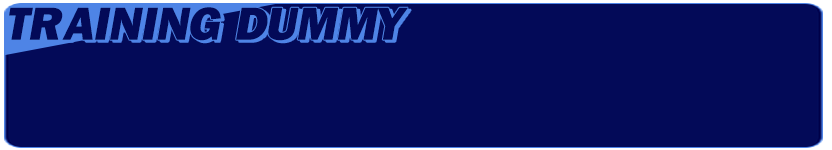
<style>
.page{position:relative;width:832px;height:150px;background:#030a58}
.page>*{position:absolute;margin:0}
.t1{font:48px "FranklinGothic-Heavy";letter-spacing:0.05em;color:#030a58;font-style:italic}
</style>
<div class="page">
<p class="t1" style="left:9px;top:7px;width:399px;height:34px">TRAINING DUMMY</p>
</div>
